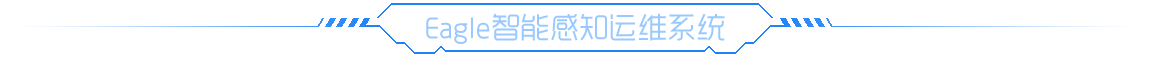
<style>
.page{position:relative;width:1150px;height:60px;background:#ffffff}
.page>*{position:absolute;margin:0}
.t1{font:29.4px "RTWSYueGoTrial-Regular";color:#9ac9ff}
</style>
<div class="page">
<p class="t1" style="left:426px;top:13px;width:299px;height:31px">Eagle智能感知运维系统</p>
</div>
